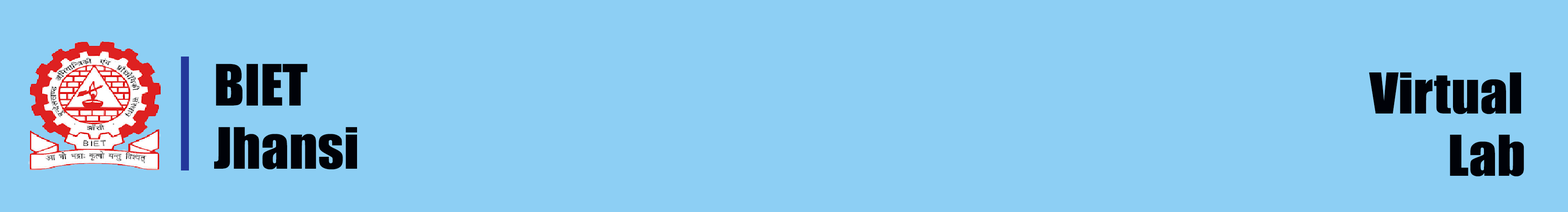
<style>
.page{position:relative;width:1568px;height:212px;background:#8dcff4}
.page>*{position:absolute;margin:0}
.t1{font:52.7px "Impact";color:#000208;scale:1.05 1}
.t2{font:52px "Impact";color:#000208;scale:1.06 1}
</style>
<div class="page">
<p class="t1" style="left:214px;top:64px;width:143px;height:106px">BIET<br>Jhansi</p>
<p class="t2" style="left:1369px;top:73px;width:155px;height:104px">Virtual<br>Lab</p>
</div>
